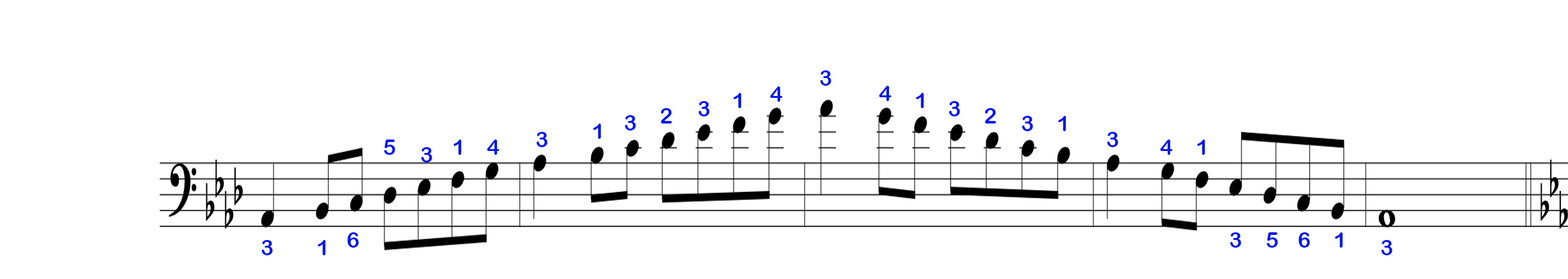
<style>
.page{position:relative;width:1568px;height:279px;background:#ffffff}
.page>*{position:absolute;margin:0}
.t1{font:21.8px "ArialRoundedMTBold";color:#0417ec}
</style>
<div class="page">
<p class="t1" style="left:820px;top:70px;width:11px;height:16px">3</p>
<p class="t1" style="left:770px;top:86px;width:13px;height:16px">4</p>
<p class="t1" style="left:879px;top:86px;width:13px;height:15px">4</p>
<p class="t1" style="left:698px;top:101px;width:12px;height:16px">3</p>
<p class="t1" style="left:733px;top:93px;width:9px;height:15px">1</p>
<p class="t1" style="left:916px;top:93px;width:8px;height:15px">1</p>
<p class="t1" style="left:949px;top:101px;width:11px;height:16px">3</p>
<p class="t1" style="left:660px;top:108px;width:12px;height:16px">2</p>
<p class="t1" style="left:984px;top:108px;width:12px;height:16px">2</p>
<p class="t1" style="left:593px;top:124px;width:8px;height:15px">1</p>
<p class="t1" style="left:625px;top:115px;width:11px;height:16px">3</p>
<p class="t1" style="left:1022px;top:116px;width:11px;height:15px">3</p>
<p class="t1" style="left:1058px;top:116px;width:8px;height:15px">1</p>
<p class="t1" style="left:536px;top:132px;width:12px;height:15px">3</p>
<p class="t1" style="left:1107px;top:132px;width:11px;height:15px">3</p>
<p class="t1" style="left:384px;top:140px;width:11px;height:15px">5</p>
<p class="t1" style="left:421px;top:147px;width:11px;height:16px">3</p>
<p class="t1" style="left:453px;top:140px;width:9px;height:15px">1</p>
<p class="t1" style="left:487px;top:140px;width:13px;height:15px">4</p>
<p class="t1" style="left:1160px;top:140px;width:13px;height:15px">4</p>
<p class="t1" style="left:1197px;top:140px;width:8px;height:15px">1</p>
<p class="t1" style="left:347px;top:233px;width:12px;height:15px">6</p>
<p class="t1" style="left:1230px;top:233px;width:11px;height:15px">3</p>
<p class="t1" style="left:1266px;top:233px;width:12px;height:15px">5</p>
<p class="t1" style="left:1298px;top:233px;width:12px;height:15px">6</p>
<p class="t1" style="left:1335px;top:233px;width:8px;height:15px">1</p>
<p class="t1" style="left:261px;top:240px;width:12px;height:16px">3</p>
<p class="t1" style="left:318px;top:240px;width:8px;height:16px">1</p>
<p class="t1" style="left:1381px;top:240px;width:11px;height:16px">3</p>
</div>
